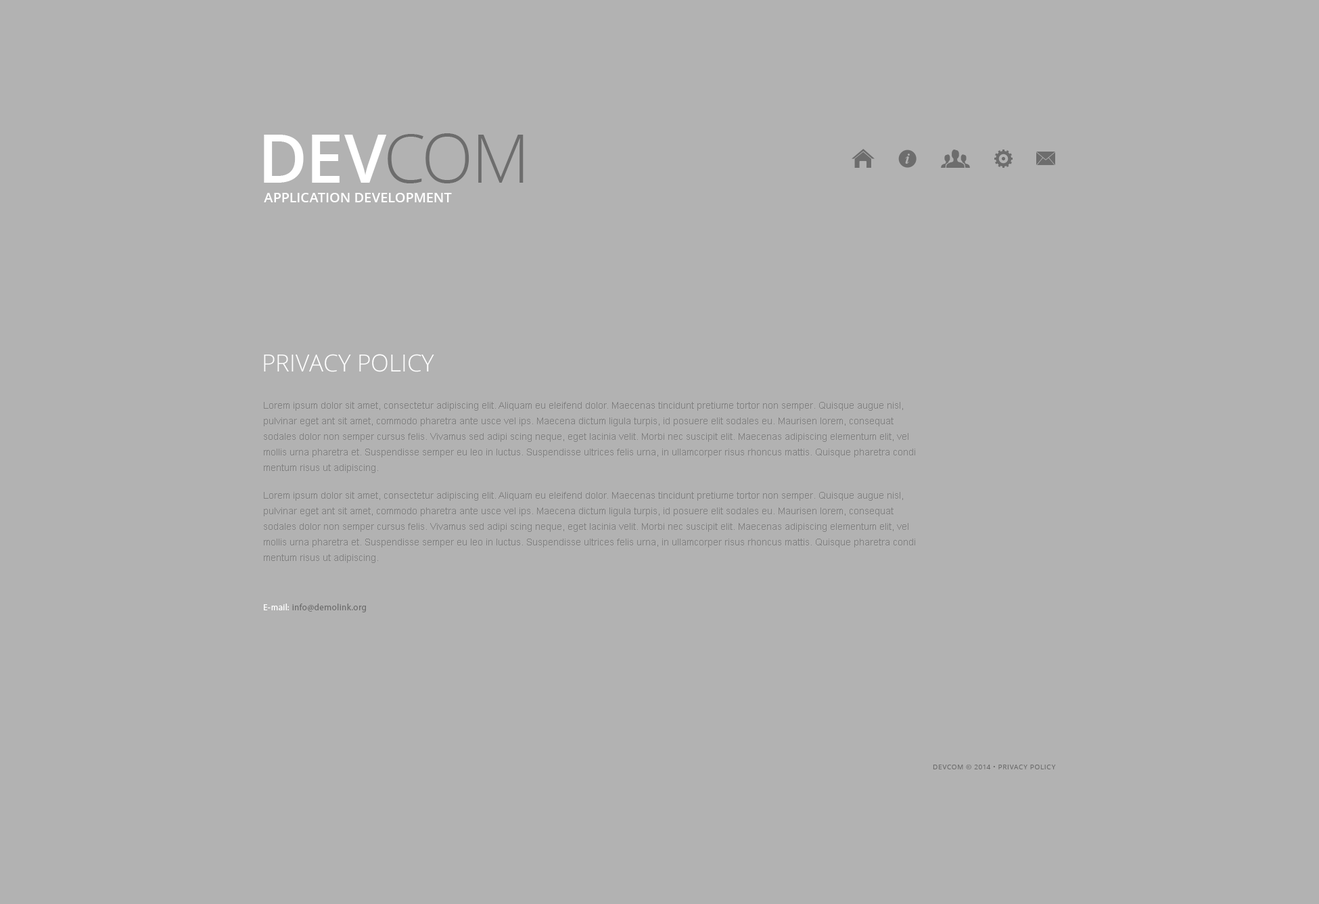
<style>
.page{position:relative;width:1319px;height:904px;background:#b2b2b2}
.page>*{position:absolute;margin:0}
.t1{font:13.5px "OpenSans-Semibold";color:#ffffff;text-transform:uppercase}
.t2{font:23.7px "OpenSans-Light";color:#ffffff;text-transform:uppercase}
.t3{font:9.5px/15.6px "ArialMT";color:#808080}
.t4{font:8.8px "MyriadPro-Regular";letter-spacing:0.04em;color:#6d6d6d}
.t5{font:8.8px "MyriadPro-Regular";letter-spacing:0.04em;color:#ffffff}
.t6{font:6.8px "OpenSans";letter-spacing:0.06em;color:#6d6d6d;text-transform:uppercase}
</style>
<div class="page">
<p class="t1" style="left:264px;top:193px;width:188px;height:9px">application development</p>
<p class="t2" style="left:264px;top:354px;width:170px;height:18px">PRIVACY POLICY</p>
<p class="t3" style="left:264px;top:402px;width:651px;height:71px">Lorem ipsum dolor sit amet, consectetur adipiscing elit. Aliquam eu eleifend dolor. Maecenas tincidunt pretiume tortor non semper. Quisque augue nisl, pulvinar eget ant sit amet, commodo pharetra ante usce vel ips. Maecena dictum ligula turpis, id posuere elit sodales eu. Maurisen lorem, consequat sodales dolor non semper cursus felis. Vivamus sed adipi scing neque, eget lacinia velit. Morbi nec suscipit elit. Maecenas adipiscing elementum elit, vel mollis urna pharetra et. Suspendisse semper eu leo in luctus. Suspendisse ultrices felis urna, in ullamcorper risus rhoncus mattis. Quisque pharetra condi mentum risus ut adipiscing.</p>
<p class="t3" style="left:264px;top:492px;width:651px;height:71px">Lorem ipsum dolor sit amet, consectetur adipiscing elit. Aliquam eu eleifend dolor. Maecenas tincidunt pretiume tortor non semper. Quisque augue nisl, pulvinar eget ant sit amet, commodo pharetra ante usce vel ips. Maecena dictum ligula turpis, id posuere elit sodales eu. Maurisen lorem, consequat sodales dolor non semper cursus felis. Vivamus sed adipi scing neque, eget lacinia velit. Morbi nec suscipit elit. Maecenas adipiscing elementum elit, vel mollis urna pharetra et. Suspendisse semper eu leo in luctus. Suspendisse ultrices felis urna, in ullamcorper risus rhoncus mattis. Quisque pharetra condi mentum risus ut adipiscing.</p>
<p class="t4" style="left:264px;top:603px;width:102px;height:9px"><span class="t5"><br>E-mail: </span>info@demolink.org</p>
<p class="t6" style="left:933px;top:764px;width:123px;height:5px">devcom © 2014 • Privacy Policy</p>
</div>
